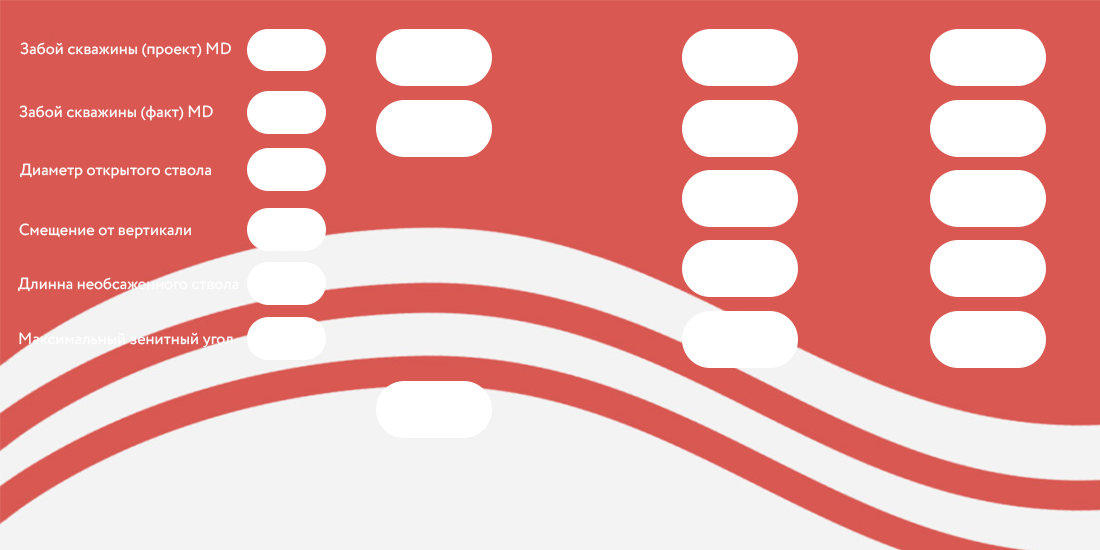
<style>
.page{position:relative;width:1100px;height:550px;background:#d95852}
.page>*{position:absolute;margin:0}
.t1{font:16.1px "Circe-Regular";color:#ffffff}
</style>
<div class="page">
<p class="t1" style="left:20px;top:42px;width:211px;height:16px">Забой скважины (проект) MD</p>
<p class="t1" style="left:19px;top:105px;width:194px;height:16px">Забой скважины (факт) MD</p>
<p class="t1" style="left:20px;top:163px;width:191px;height:16px">Диаметр открытого ствола</p>
<p class="t1" style="left:19px;top:223px;width:172px;height:16px">Смещение от вертикали</p>
<p class="t1" style="left:18px;top:277px;width:221px;height:15px">Длинна необсаженного ствола</p>
<p class="t1" style="left:19px;top:332px;width:214px;height:16px">Максимальный зенитный угол</p>
</div>
